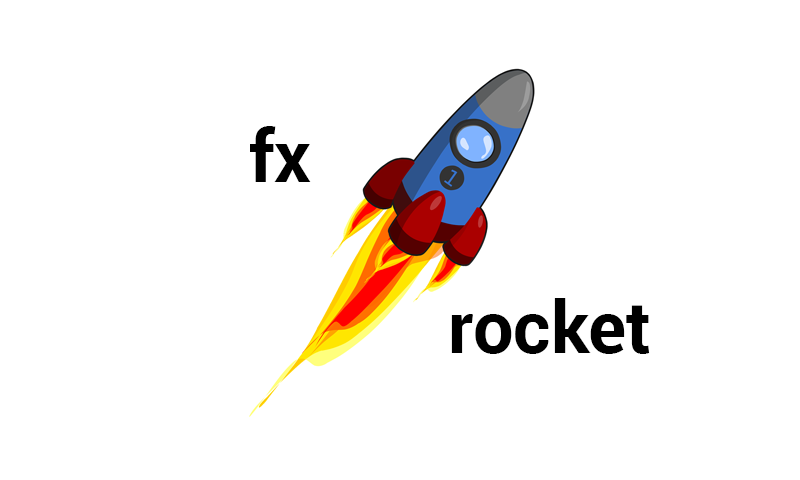
<style>
.page{position:relative;width:800px;height:480px;background:#ffffff}
.page>*{position:absolute;margin:0}
.t1{font:72px "Roboto-Bold";color:#000000}
</style>
<div class="page">
<p class="t1" style="left:250px;top:126px;width:61px;height:56px">fx</p>
<p class="t1" style="left:451px;top:298px;width:199px;height:56px">rocket</p>
</div>
